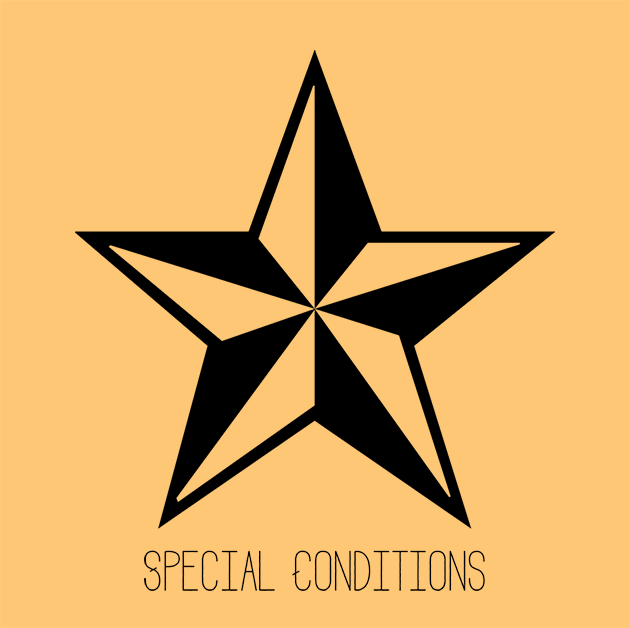
<style>
.page{position:relative;width:630px;height:628px;background:#fec775}
.page>*{position:absolute;margin:0}
.t1{font:79.9px "Adrift";color:#010101}
</style>
<div class="page">
<p class="t1" style="left:144px;top:550px;width:341px;height:41px">Special Conditions</p>
</div>
